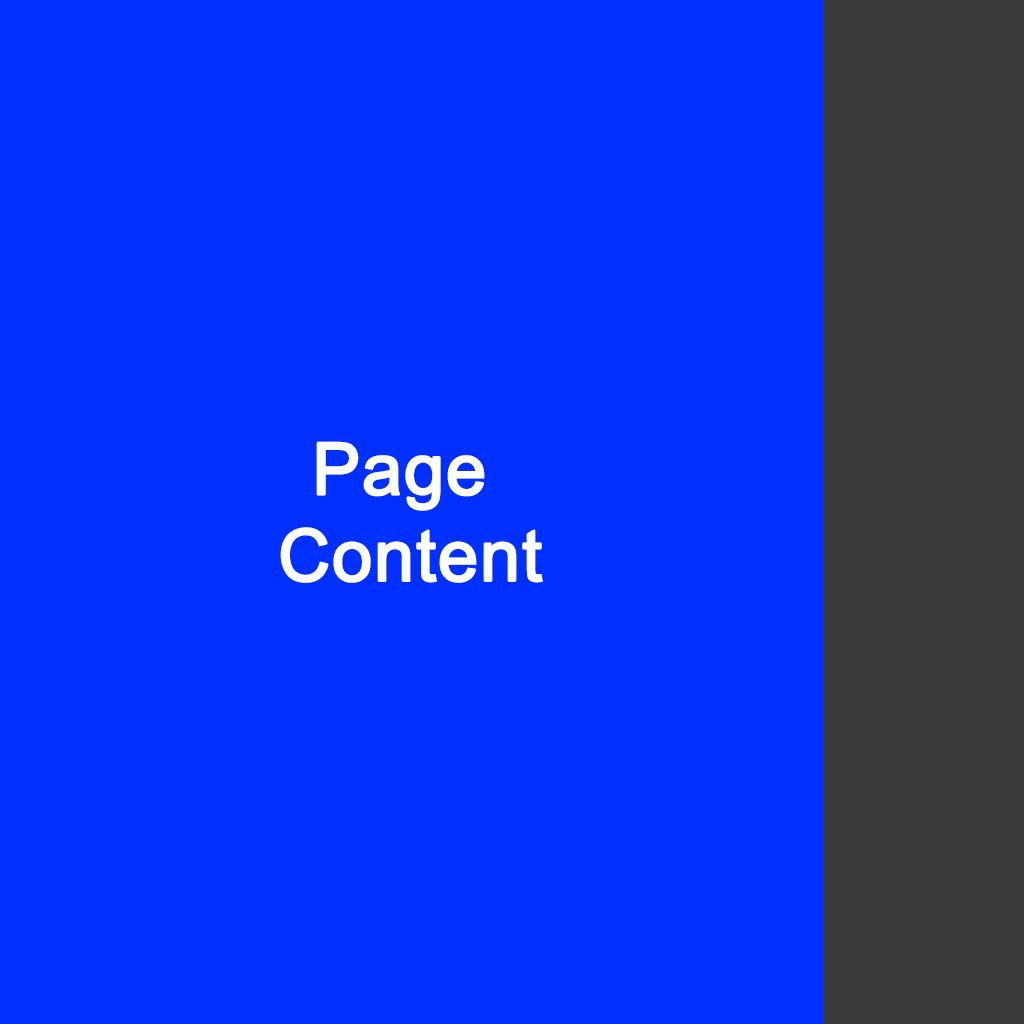
<style>
.page{position:relative;width:1024px;height:1024px;background:#0030ff}
.page>*{position:absolute;margin:0}
.t1{font:72px "ArialMT";color:#ffffff;font-weight:bold}
</style>
<div class="page">
<p class="t1" style="left:280px;top:441px;width:263px;height:142px;text-align:center">Page <br>Content</p>
</div>
